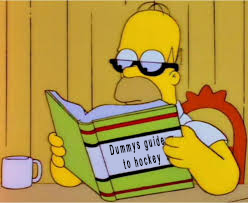
<style>
.page{position:relative;width:248px;height:203px}
.page>*{position:absolute;margin:0}
.t1{font:13.8px "ArialMT";letter-spacing:0.32em;color:#000000;scale:0.39 1}
</style>
<div class="page">
<p class="t1" style="left:109px;top:135px;width:56px;height:35px;text-align:center;rotate:-11deg">Dummys guide <br>to hockey</p>
</div>
